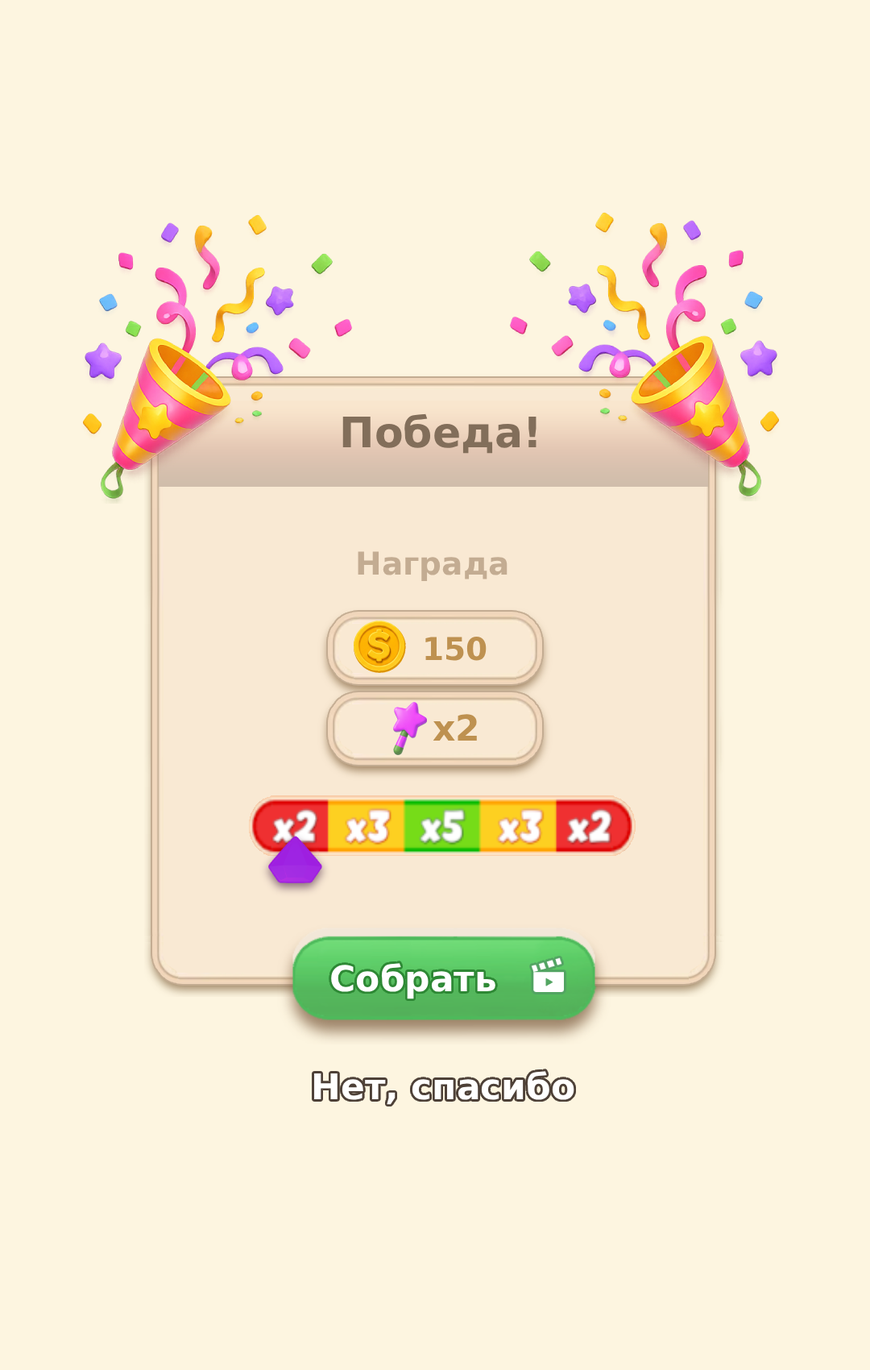
<style>
.page{position:relative;width:870px;height:1370px;background:#fdf5e0}
.page>*{position:absolute;margin:0}
.t1{font:41.9px "DejaVuSans-Bold";color:#826e5a}
.t2{font:31.4px "DejaVuSans-Bold";color:#c3ac92}
.t3{font:31.4px "DejaVuSans-Bold";color:#be9150}
.t4{font:35.5px "DejaVuSans-Bold";color:#be9150}
.t5{font:35.5px "DejaVuSans-Bold";color:#ffffff}
</style>
<div class="page">
<p class="t1" style="left:343px;top:413px;width:194px;height:41px">Победа!</p>
<p class="t2" style="left:358px;top:551px;width:150px;height:31px">Награда</p>
<p class="t3" style="left:426px;top:637px;width:61px;height:24px">150</p>
<p class="t4" style="left:433px;top:714px;width:44px;height:27px">x2</p>
<p class="t5" style="left:331px;top:963px;width:165px;height:36px">Собрать</p>
<p class="t5" style="left:314px;top:1071px;width:261px;height:34px">Нет, спасибо</p>
</div>
